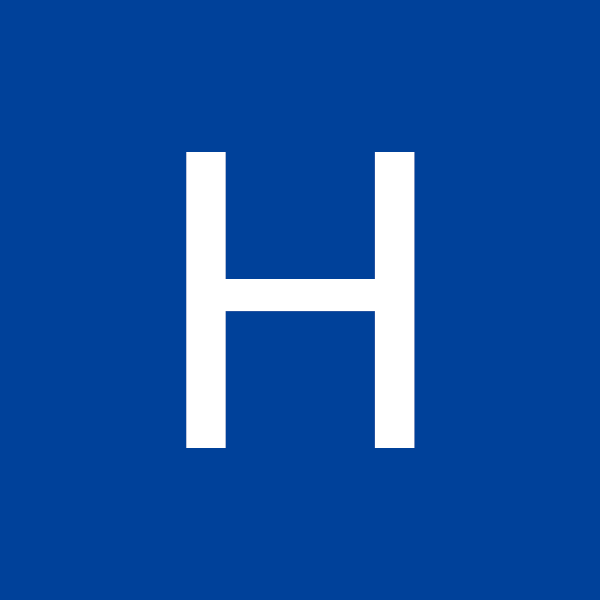
<style>
.page{position:relative;width:600px;height:600px;background:#00419a}
.page>*{position:absolute;margin:0}
.t1{font:416.7px "Roboto-Regular";color:#ffffff}
</style>
<div class="page">
<p class="t1" style="left:186px;top:152px;width:229px;height:296px">H</p>
</div>
